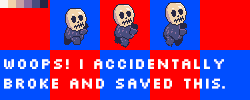
<style>
.page{position:relative;width:250px;height:100px;background:#ff0000}
.page>*{position:absolute;margin:0}
.t1{font:16px "Silkscreen";color:#ffffff;font-weight:bold}
</style>
<div class="page">
<p class="t1" style="left:4px;top:59px;width:220px;height:10px">woops! I accidentally</p>
<p class="t1" style="left:4px;top:78px;width:221px;height:11px">broke and saved this.</p>
</div>
